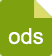
<style>
.page{position:relative;width:52px;height:56px;background:#7ea10f}
.page>*{position:absolute;margin:0}
.t1{font:22px "ArialMT";color:#ffffff}
</style>
<div class="page">
<p class="t1" style="left:8px;top:28px;width:35px;height:17px">ods</p>
</div>
